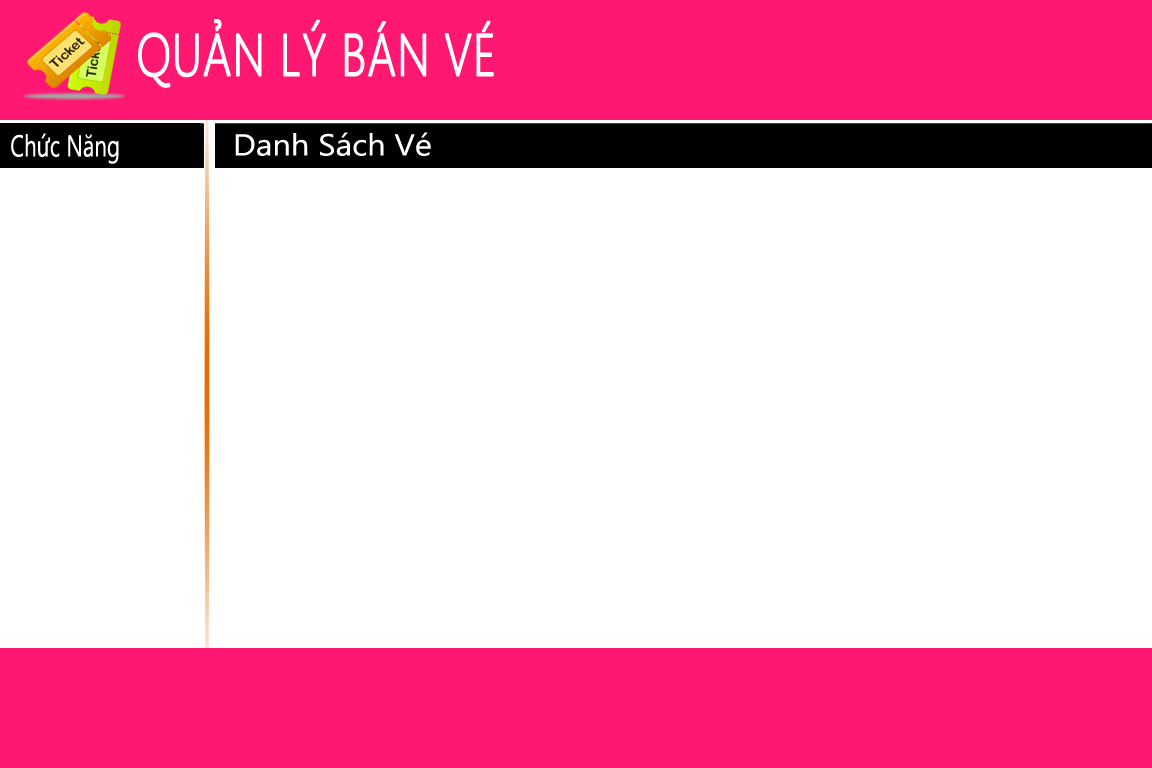
<style>
.page{position:relative;width:1152px;height:768px;background:#ffffff}
.page>*{position:absolute;margin:0}
.t1{font:59.3px "SegoeUI-Light";color:#ffffff;text-transform:uppercase;font-weight:bold;scale:0.77 1}
.t2{font:30.3px "SegoeUI";color:#ffffff;scale:0.74 1}
.t3{font:30.3px "SegoeUI";color:#ffffff;scale:1.08 1}
</style>
<div class="page">
<p class="t1" style="left:138px;top:19px;width:356px;height:69px">QUẢN LÝ BÁN VÉ</p>
<p class="t2" style="left:11px;top:133px;width:108px;height:31px">Chức Năng</p>
<p class="t3" style="left:235px;top:132px;width:196px;height:24px">Danh Sách Vé</p>
</div>
